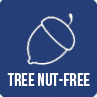
<style>
.page{position:relative;width:97px;height:97px;background:#253e77}
.page>*{position:absolute;margin:0}
.t1{font:18px "BebasNeue";color:#ffffff}
</style>
<div class="page">
<p class="t1" style="left:7px;top:73px;width:83px;height:13px">tree nut-free</p>
</div>
